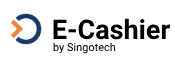
<style>
.page{position:relative;width:175px;height:58px;background:#ffffff}
.page>*{position:absolute;margin:0}
.t1{font:27px "Roboto-Bold";color:#000000}
.t2{font:11px "Roboto-Regular";color:#0e0e0e}
</style>
<div class="page">
<p class="t1" style="left:53px;top:18px;width:117px;height:22px">E-Cashier</p>
<p class="t2" style="left:53px;top:42px;width:63px;height:12px">by Singotech</p>
</div>
